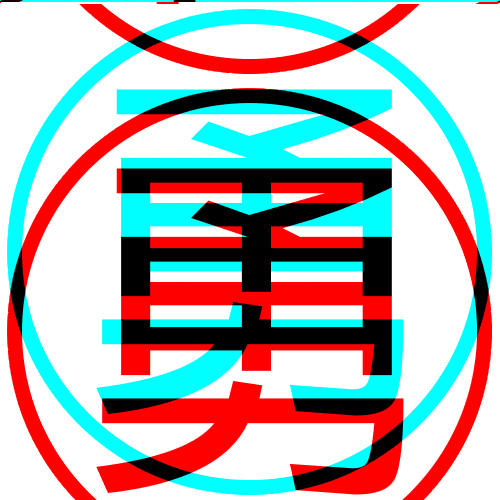
<style>
.page{position:relative;width:500px;height:500px;background:#ffffff}
.page>*{position:absolute;margin:0}
.t1{font:372.6px "DroidSansFallback"}
</style>
<div class="page">
<p class="t1" style="left:96px;top:87px;width:308px;height:327px">勇</p>
</div>
